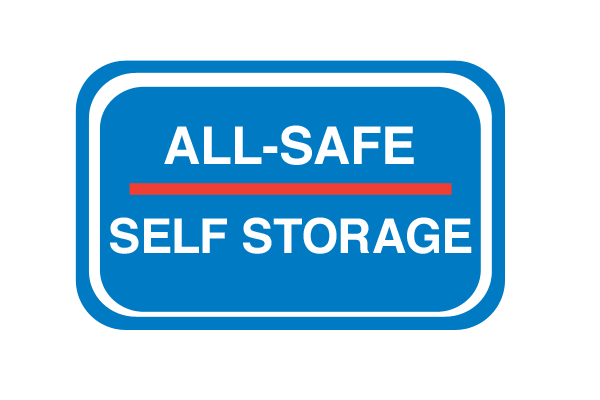
<style>
.page{position:relative;width:600px;height:400px;background:#ffffff}
.page>*{position:absolute;margin:0}
.t1{font:52px "Helvetica-Bold";color:#ffffff}
.t2{font:48px "Helvetica-Bold";color:#fefefe}
</style>
<div class="page">
<p class="t1" style="left:164px;top:125px;width:250px;height:40px">ALL-SAFE</p>
<p class="t2" style="left:110px;top:217px;width:362px;height:37px">SELF STORAGE</p>
</div>
